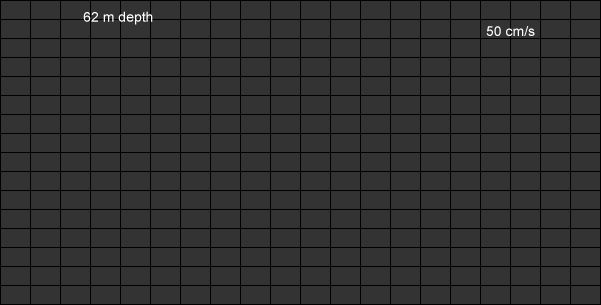
<style>
.page{position:relative;width:601px;height:305px;background:#333333}
.page>*{position:absolute;margin:0}
.t1{font:14px "ArialMT";color:#ffffff}
</style>
<div class="page">
<p class="t1" style="left:83px;top:11px;width:70px;height:14px">62 m depth</p>
<p class="t1" style="left:486px;top:26px;width:49px;height:10px">50 cm/s</p>
</div>
